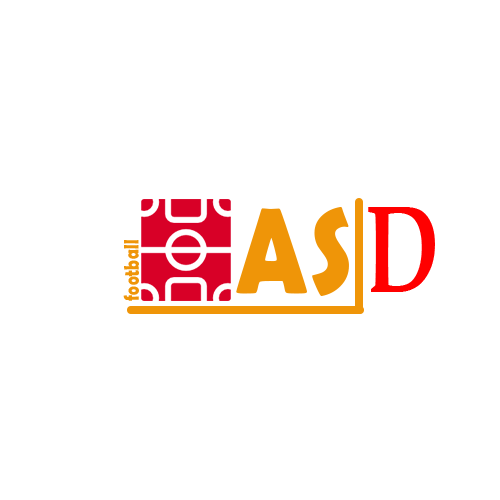
<style>
.page{position:relative;width:500px;height:500px;background:#ffffff}
.page>*{position:absolute;margin:0}
.t1{font:122.6px "BerlinSansFBDemi-Bold";letter-spacing:0.02em;color:#ef9508;scale:0.84 1}
.t2{font:124.3px "BookAntiqua-Bold";letter-spacing:0.02em;color:#ff0000;scale:0.71 1}
.t3{font:21.2px "BerlinSansFBDemi-Bold";letter-spacing:0.02em;color:#ef9508;scale:0.79 1}
</style>
<div class="page">
<p class="t1" style="left:236px;top:207px;width:113px;height:89px">AS</p>
<p class="t2" style="left:368px;top:207px;width:67px;height:85px">D</p>
<p class="t3" style="left:123px;top:240px;width:16px;height:61px;rotate:-90deg">football</p>
</div>
